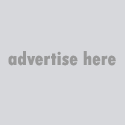
<style>
.page{position:relative;width:125px;height:125px;background:#d7d8dc}
.page>*{position:absolute;margin:0}
.t1{font:20px "TwCenMT-CondensedExtraBold";color:#999999}
</style>
<div class="page">
<p class="t1" style="left:8px;top:51px;width:108px;height:15px">advertise here</p>
</div>
